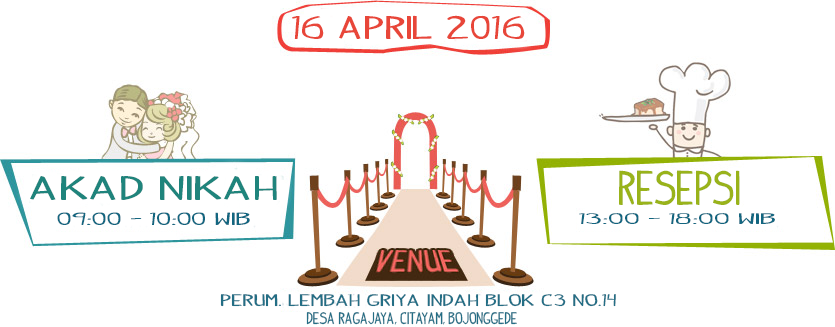
<style>
.page{position:relative;width:835px;height:327px;background:#ffffff}
.page>*{position:absolute;margin:0}
.t1{font:25.5px "IndyPimp";color:#e84639;scale:1.73 1}
.t2{font:38px "IndyPimp";color:#99b31a}
.t3{font:26.5px "IndyPimp";color:#1f847c;scale:1.98 1}
.t4{font:13.7px "IndyPimp";color:#126680;scale:2.27 1}
.t5{font:11.9px "IndyPimp";color:#126680;scale:2.73 1}
.t6{font:13px "IndyPimp";color:#236e85;scale:1.82 1}
.t7{font:13px "IndyPimp";color:#236e85}
</style>
<div class="page">
<p class="t1" style="left:292px;top:15px;width:233px;height:24px">16 april 2016</p>
<p class="t2" style="left:619px;top:170px;width:121px;height:35px">resepsi</p>
<p class="t3" style="left:30px;top:176px;width:247px;height:24px">Akad Nikah</p>
<p class="t4" style="left:57px;top:212px;width:193px;height:13px">09:00 - 10:00 WIB</p>
<p class="t5" style="left:579px;top:213px;width:196px;height:11px">13:00 - 18:00 wib</p>
<p class="t6" style="left:220px;top:294px;width:396px;height:13px">perum. lembah griya indah blok c3 no.14</p>
<p class="t7" style="left:306px;top:312px;width:211px;height:13px">desa ragajaya, citayam, bojonggede</p>
</div>
